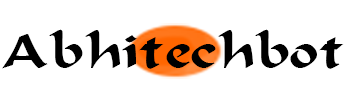
<style>
.page{position:relative;width:350px;height:100px;background:#ffffff}
.page>*{position:absolute;margin:0}
.t1{font:53.2px "Bodacious-Normal";color:#000000;scale:1.22 1}
</style>
<div class="page">
<p class="t1" style="left:2px;top:29px;width:342px;height:40px">Abhitechbot</p>
</div>
